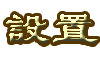
<style>
.page{position:relative;width:100px;height:60px;background:#ffffff}
.page>*{position:absolute;margin:0}
.t1{font:48px "LiSu"}
</style>
<div class="page">
<p class="t1" style="left:6px;top:14px;width:92px;height:30px">設置</p>
</div>
